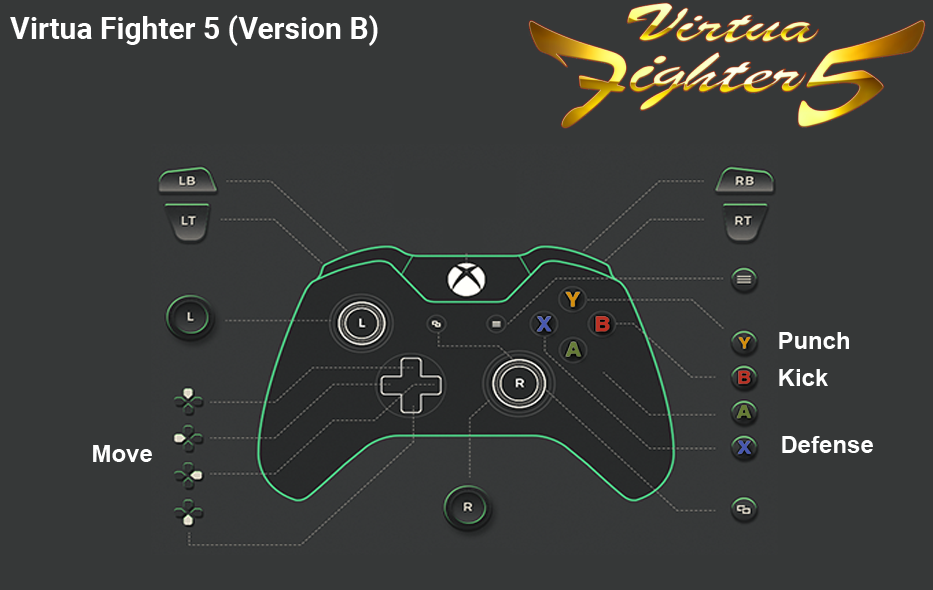
<style>
.page{position:relative;width:933px;height:590px;background:#363838}
.page>*{position:absolute;margin:0}
.t1{font:30px "Roboto-Bold";color:#ffffff}
.t2{font:24px "Arial-BoldMT";color:#fefefe}
</style>
<div class="page">
<p class="t1" style="left:10px;top:15px;width:368px;height:31px">Virtua Fighter 5 (Version B)</p>
<p class="t2" style="left:779px;top:332px;width:70px;height:17px">Punch</p>
<p class="t2" style="left:779px;top:369px;width:49px;height:17px">Kick</p>
<p class="t2" style="left:782px;top:436px;width:91px;height:17px">Defense</p>
<p class="t2" style="left:93px;top:445px;width:59px;height:17px">Move</p>
</div>
